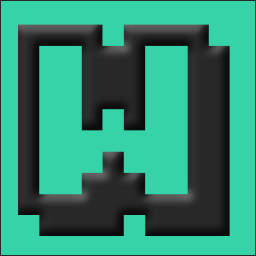
<style>
.page{position:relative;width:256px;height:256px;background:#36d2a8}
.page>*{position:absolute;margin:0}
.t1{font:216.7px "KarmaticArcade";color:#282828}
</style>
<div class="page">
<p class="t1" style="left:18px;top:24px;width:212px;height:212px">W</p>
</div>
